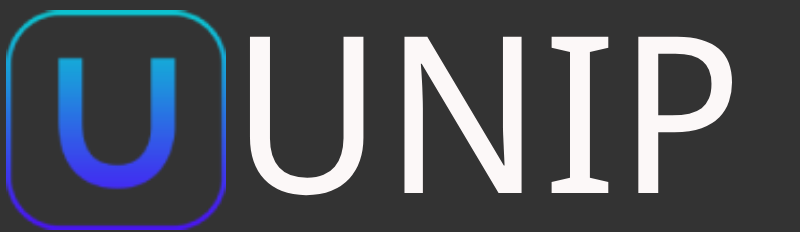
<style>
.page{position:relative;width:800px;height:232px;background:#333333}
.page>*{position:absolute;margin:0}
.t1{font:218.8px "DroidSans";color:#fcf8f8}
</style>
<div class="page">
<p class="t1" style="left:249px;top:36px;width:483px;height:160px">UNIP</p>
</div>
